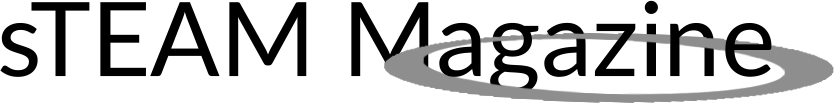
<style>
.page{position:relative;width:834px;height:103px;background:#ffffff}
.page>*{position:absolute;margin:0}
.t1{font:103px "Lato-Regular";color:#000000}
</style>
<div class="page">
<p class="t1" style="left:0px;top:0px;width:772px;height:95px">sTEAM Magazine</p>
</div>
